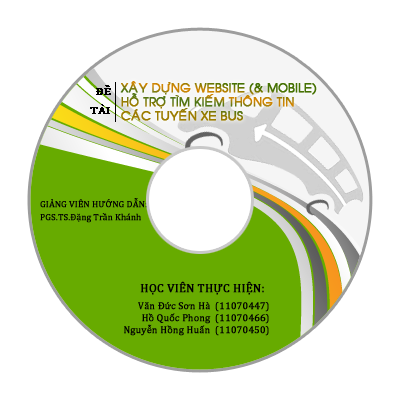
<style>
.page{position:relative;width:400px;height:400px;background:#ffffff}
.page>*{position:absolute;margin:0}
.t1{font:11px/19px "Cambria";color:#000000;font-weight:bold}
.t2{font:12px/14px "VNI-Avo";font-weight:bold}
.t3{font:9px/13px "Cambria";color:#000000;font-weight:bold}
.t4{font:9px/10px "Cambria";color:#000000;text-transform:uppercase;font-weight:bold}
.t5{font:12px "Cambria";color:#000000;text-transform:uppercase;font-weight:bold}
.t6{font:10px/12px "Cambria";color:#000000;font-weight:bold}
.t7{font:10px/16px "Cambria";color:#000000;font-weight:bold}
</style>
<div class="page">
<p class="t1" style="left:90px;top:85px;width:21px;height:29px;text-align:right">ĐỀ<br>TÀI</p>
<p class="t2" style="left:120px;top:81px;width:197px;height:40px">XAÂY DÖÏNG WEBSITE (&amp; MOBILE)<br>HOÃ TRÔÏ TÌM KIEÁM THOÂNG TIN<br>CAÙC TUYEÁN XE BUS</p>
<p class="t3" style="left:40px;top:198px;width:107px;height:25px"><span class="t4">GIẢNG viên hướng dẫn:<br></span>PGS.TS.Đặng Trần Khánh</p>
<p class="t5" style="left:140px;top:281px;width:124px;height:14px">Học viên thực hiện:</p>
<p class="t6" style="left:124px;top:302px;width:87px;height:34px;text-align:right"><span class="t7">Văn Đức Sơn Hà<br></span>Hồ Quốc Phong <br>Nguyễn Hồng Huấn</p>
<p class="t6" style="left:215px;top:302px;width:54px;height:34px"><span class="t7">(11070447)<br></span>(11070466)<br>(11070450)</p>
</div>
